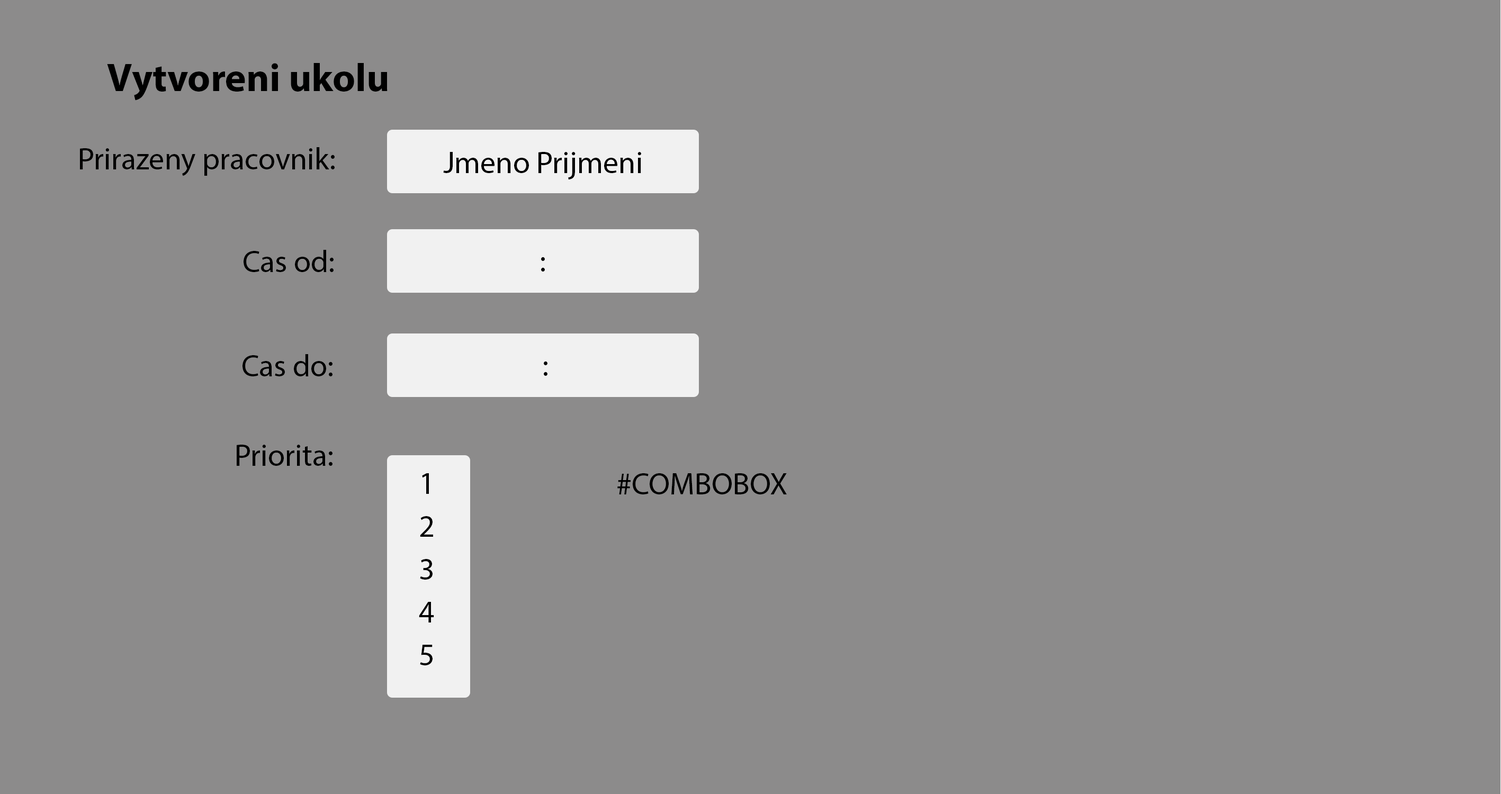
<style>
.page{position:relative;width:1501px;height:794px;background:#8c8b8b}
.page>*{position:absolute;margin:0}
.t1{font:39.7px "MyriadPro-Bold";color:#000000}
.t2{font:30.9px "MyriadPro-Regular";color:#000000}
</style>
<div class="page">
<p class="t1" style="left:107px;top:63px;width:281px;height:38px">Vytvoreni ukolu</p>
<p class="t2" style="left:80px;top:147px;width:255px;height:29px">Prirazeny pracovnik:</p>
<p class="t2" style="left:443px;top:152px;width:198px;height:28px">Jmeno Prijmeni</p>
<p class="t2" style="left:244px;top:250px;width:90px;height:22px">Cas od:</p>
<p class="t2" style="left:541px;top:257px;width:4px;height:15px">:</p>
<p class="t2" style="left:243px;top:354px;width:90px;height:22px">Cas do:</p>
<p class="t2" style="left:544px;top:361px;width:4px;height:15px">:</p>
<p class="t2" style="left:237px;top:445px;width:96px;height:21px">Priorita:</p>
<p class="t2" style="left:422px;top:473px;width:7px;height:21px">1</p>
<p class="t2" style="left:617px;top:473px;width:170px;height:22px">#COMBOBOX</p>
<p class="t2" style="left:420px;top:516px;width:13px;height:21px">2</p>
<p class="t2" style="left:420px;top:559px;width:13px;height:21px">3</p>
<p class="t2" style="left:419px;top:602px;width:15px;height:21px">4</p>
<p class="t2" style="left:420px;top:645px;width:13px;height:21px">5</p>
</div>
